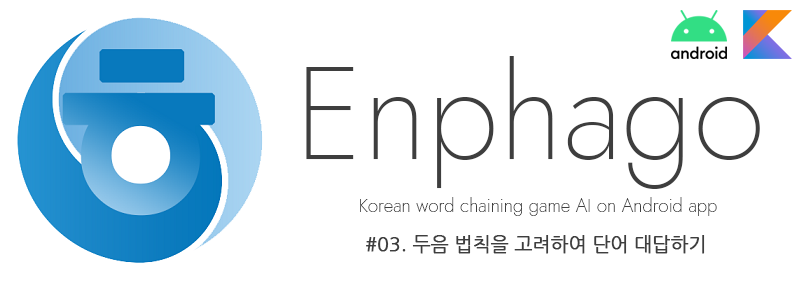
<style>
.page{position:relative;width:807px;height:290px;background:#ffffff}
.page>*{position:absolute;margin:0}
.t1{font:130.7px "Jost-Thin";color:#3e3e3e}
.t2{font:18.7px "Jost-Thin";color:#3e3e3e}
.t3{font:18.7px "NanumGothic";color:#3e3e3e;font-weight:bold}
</style>
<div class="page">
<p class="t1" style="left:306px;top:56px;width:454px;height:133px">Enphago</p>
<p class="t2" style="left:360px;top:197px;width:357px;height:19px">Korean word chaining game AI on Android app</p>
<p class="t3" style="left:366px;top:235px;width:339px;height:19px">#03. 두음 법칙을 고려하여 단어 대답하기</p>
</div>
